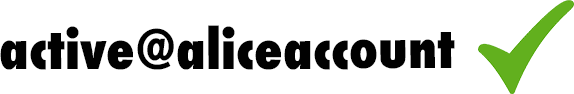
<style>
.page{position:relative;width:574px;height:94px;background:#ffffff}
.page>*{position:absolute;margin:0}
.t1{font:52.8px "Futura-CondensedExtraBold";color:#010101}
</style>
<div class="page">
<p class="t1" style="left:0px;top:25px;width:455px;height:45px">active@aliceaccount</p>
</div>
